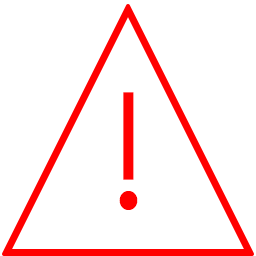
<style>
.page{position:relative;width:256px;height:256px;background:#ffffff}
.page>*{position:absolute;margin:0}
.t1{font:157.3px "CenturyGothic";color:#ff0000;scale:0.92 1}
</style>
<div class="page">
<p class="t1" style="left:119px;top:92px;width:19px;height:118px">!</p>
</div>
